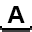
<style>
.page{position:relative;width:32px;height:32px;background:#ffffff}
.page>*{position:absolute;margin:0}
.t1{font:24px "Arial-BoldMT";color:#000000}
</style>
<div class="page">
<p class="t1" style="left:7px;top:6px;width:18px;height:17px">A</p>
</div>
